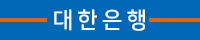
<style>
.page{position:relative;width:200px;height:40px;background:#0068b7}
.page>*{position:absolute;margin:0}
.t1{font:22.4px "NanumSquareB";letter-spacing:0.2em;color:#ffffff}
</style>
<div class="page">
<p class="t1" style="left:54px;top:9px;width:91px;height:22px">대한은행</p>
</div>
